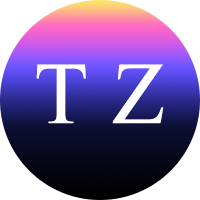
<style>
.page{position:relative;width:200px;height:200px;background:#ffffff}
.page>*{position:absolute;margin:0}
.t1{font:88.2px "TimesNewRomanPSMT";letter-spacing:0.02em;color:#ffffff}
</style>
<div class="page">
<p class="t1" style="left:36px;top:64px;width:128px;height:59px">T Z</p>
</div>
